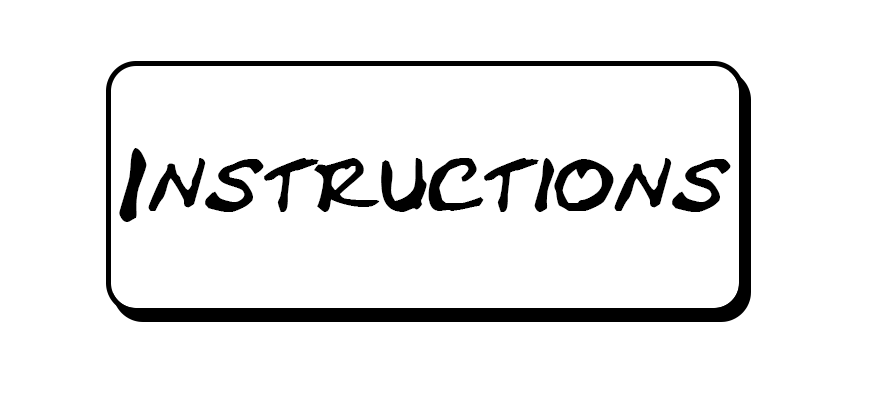
<style>
.page{position:relative;width:873px;height:419px;background:#ffffff}
.page>*{position:absolute;margin:0}
.t1{font:75px "CrackedJohnnie";color:#000000}
</style>
<div class="page">
<p class="t1" style="left:119px;top:148px;width:612px;height:74px">Instructions</p>
</div>
